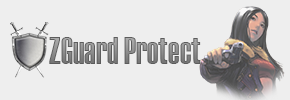
<style>
.page{position:relative;width:290px;height:100px;background:#eeeeee}
.page>*{position:absolute;margin:0}
.t1{font:37.5px "Haettenschweiler";scale:0.86 1}
</style>
<div class="page">
<p class="t1" style="left:49px;top:37px;width:152px;height:27px">ZGuard Protect</p>
</div>
